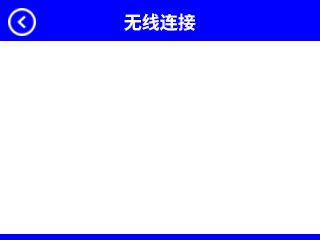
<style>
.page{position:relative;width:320px;height:240px;background:#ffffff}
.page>*{position:absolute;margin:0}
.t1{font:18px "SourceHanSansSC-Bold";color:#ffffff}
</style>
<div class="page">
<p class="t1" style="left:124px;top:13px;width:72px;height:18px">无线连接</p>
</div>
